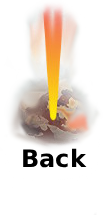
<style>
.page{position:relative;width:110px;height:220px;background:#ffffff}
.page>*{position:absolute;margin:0}
.t1{font:24px "DejaVuSans-Bold";color:#000000}
</style>
<div class="page">
<p class="t1" style="left:23px;top:148px;width:64px;height:20px">Back</p>
</div>
